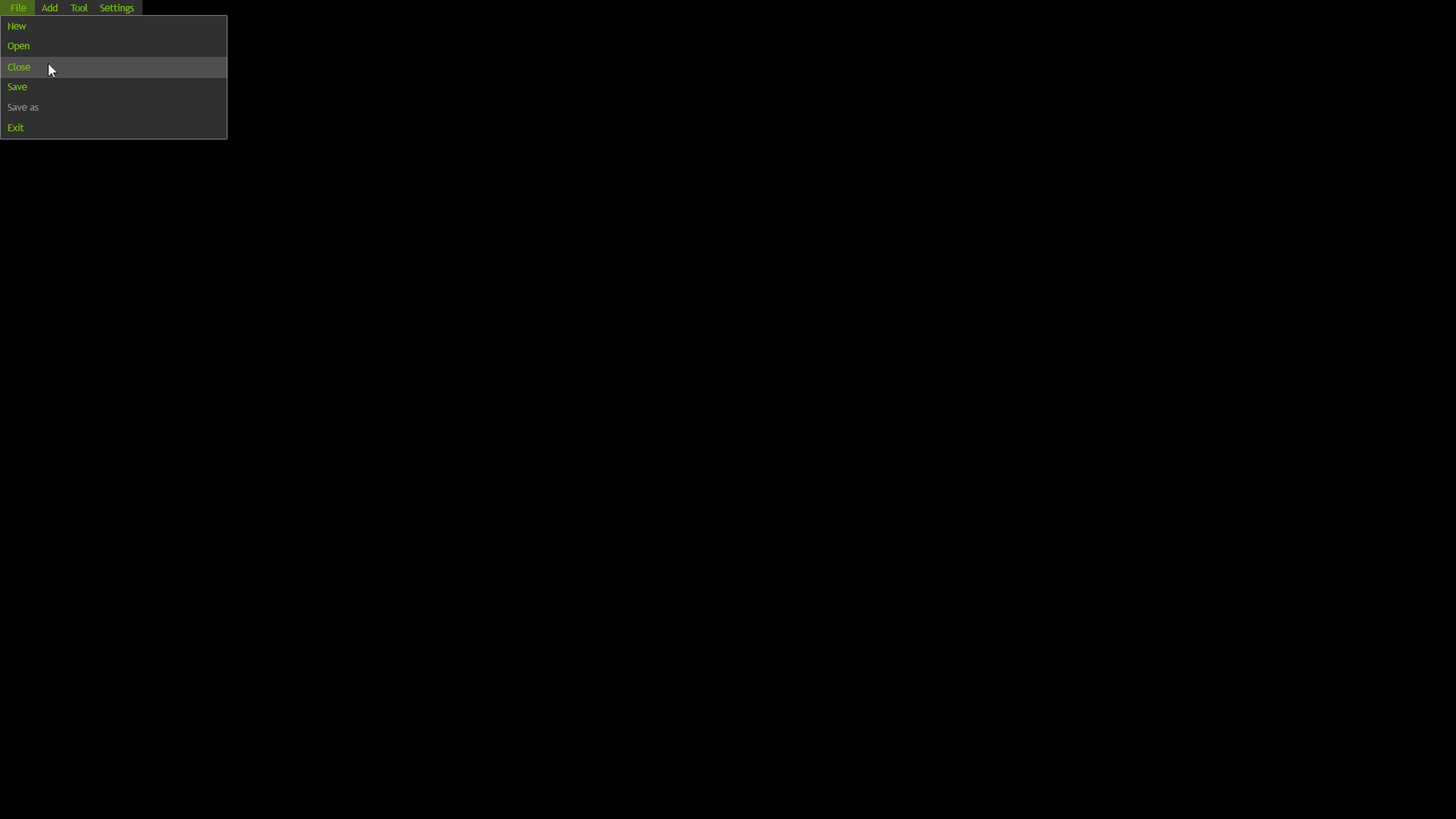
<style>
.page{position:relative;width:1456px;height:819px;background:#000000}
.page>*{position:absolute;margin:0}
.t1{font:9.5px "TrebuchetMS";color:#73b900}
.t2{font:9.5px "TrebuchetMS";color:#888888}
</style>
<div class="page">
<p class="t1" style="left:11px;top:4px;width:16px;height:7px">File</p>
<p class="t1" style="left:42px;top:4px;width:16px;height:7px">Add</p>
<p class="t1" style="left:70px;top:4px;width:18px;height:7px">Tool</p>
<p class="t1" style="left:100px;top:4px;width:34px;height:10px">Settings</p>
<p class="t1" style="left:8px;top:23px;width:19px;height:7px">New</p>
<p class="t1" style="left:8px;top:42px;width:22px;height:10px">Open</p>
<p class="t1" style="left:8px;top:63px;width:22px;height:8px">Close</p>
<p class="t1" style="left:8px;top:83px;width:19px;height:7px">Save</p>
<p class="t2" style="left:8px;top:104px;width:31px;height:7px">Save as</p>
<p class="t1" style="left:8px;top:124px;width:16px;height:7px">Exit</p>
</div>
